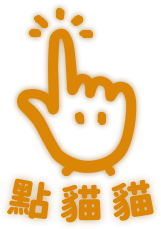
<style>
.page{position:relative;width:161px;height:229px;background:#ffffff}
.page>*{position:absolute;margin:0}
.t1{font:40px "GenSenMaruGothicTW-Heavy-TTF";letter-spacing:0.2em;color:#dc8605}
</style>
<div class="page">
<p class="t1" style="left:7px;top:178px;width:147px;height:45px">點貓貓</p>
</div>
